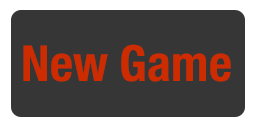
<style>
.page{position:relative;width:256px;height:128px;background:#363636}
.page>*{position:absolute;margin:0}
.t1{font:49.7px "HelveticaNeue-CondensedBold";color:#cd2b00}
</style>
<div class="page">
<p class="t1" style="left:23px;top:44px;width:208px;height:38px">New Game</p>
</div>
